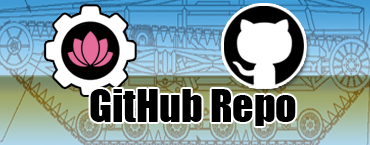
<style>
.page{position:relative;width:370px;height:145px}
.page>*{position:absolute;margin:0}
.t1{font:41.7px "Impact";color:#000000}
</style>
<div class="page">
<p class="t1" style="left:90px;top:89px;width:206px;height:37px">GitHub Repo</p>
</div>
